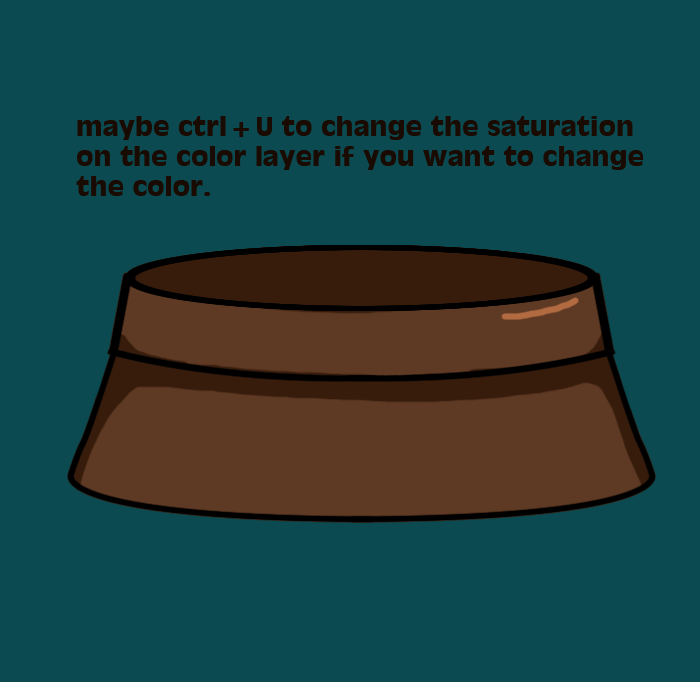
<style>
.page{position:relative;width:700px;height:682px;background:#0b4a50}
.page>*{position:absolute;margin:0}
.t1{font:25px "AntiqueOlive-Bold";color:#1a0b02}
</style>
<div class="page">
<p class="t1" style="left:76px;top:116px;width:568px;height:80px">maybe ctrl+U to change the saturation<br>on the color layer if you want to change <br>the color.</p>
</div>
